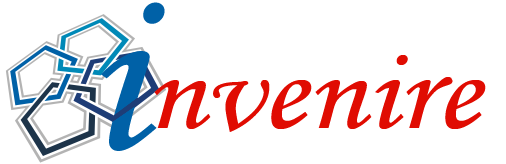
<style>
.page{position:relative;width:506px;height:164px;background:#ffffff}
.page>*{position:absolute;margin:0}
.t1{font:117.3px "MonotypeCorsiva";color:#e00c02;scale:1.11 1}
</style>
<div class="page">
<p class="t1" style="left:154px;top:55px;width:332px;height:77px">nvenire</p>
</div>
